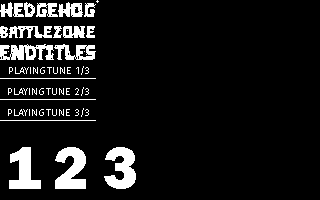
<style>
.page{position:relative;width:320px;height:200px;background:#000000}
.page>*{position:absolute;margin:0}
.t1{font:20px "DieinafirePG";color:#ffffff}
.t2{font:17.5px "DieinafirePG";color:#ffffff}
.t3{font:20.5px "DieinafirePG";color:#ffffff}
.t4{font:9.8px "FiraSans-Regular";color:#ffffff}
.t5{font:61.8px "FranklinGothic-Heavy";color:#ffffff}
.t6{font:61.6px "FranklinGothic-Heavy";color:#ffffff}
.t7{font:59.5px "FranklinGothic-Heavy";color:#ffffff}
</style>
<div class="page">
<p class="t1" style="left:0px;top:2px;width:96px;height:15px">HEDGEHOG</p>
<p class="t2" style="left:0px;top:26px;width:95px;height:12px">BATTLEZONE</p>
<p class="t3" style="left:0px;top:44px;width:96px;height:16px">ENDTITLES</p>
<p class="t4" style="left:9px;top:66px;width:80px;height:9px">PLAYING TUNE  1/3</p>
<p class="t4" style="left:8px;top:87px;width:81px;height:9px">PLAYING TUNE  2/3</p>
<p class="t4" style="left:8px;top:108px;width:81px;height:9px">PLAYING TUNE  3/3</p>
<p class="t5" style="left:9px;top:147px;width:32px;height:42px">1</p>
<p class="t6" style="left:55px;top:147px;width:31px;height:42px">2</p>
<p class="t7" style="left:104px;top:147px;width:32px;height:42px">3</p>
</div>
